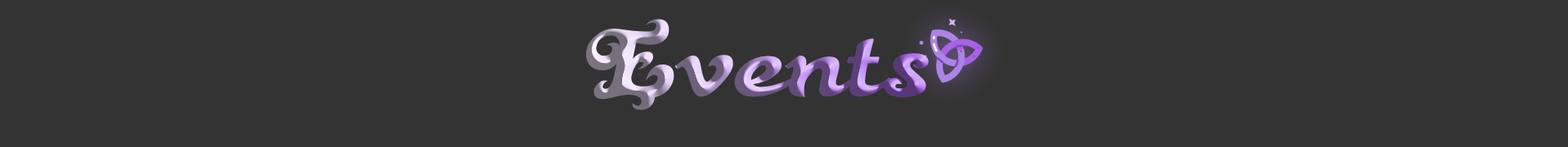
<style>
.page{position:relative;width:1568px;height:147px;background:#333333}
.page>*{position:absolute;margin:0}
.t1{font:108.8px "BlackRose";scale:1.2 1}
</style>
<div class="page">
<p class="t1" style="left:585px;top:19px;width:345px;height:91px">Events</p>
</div>
